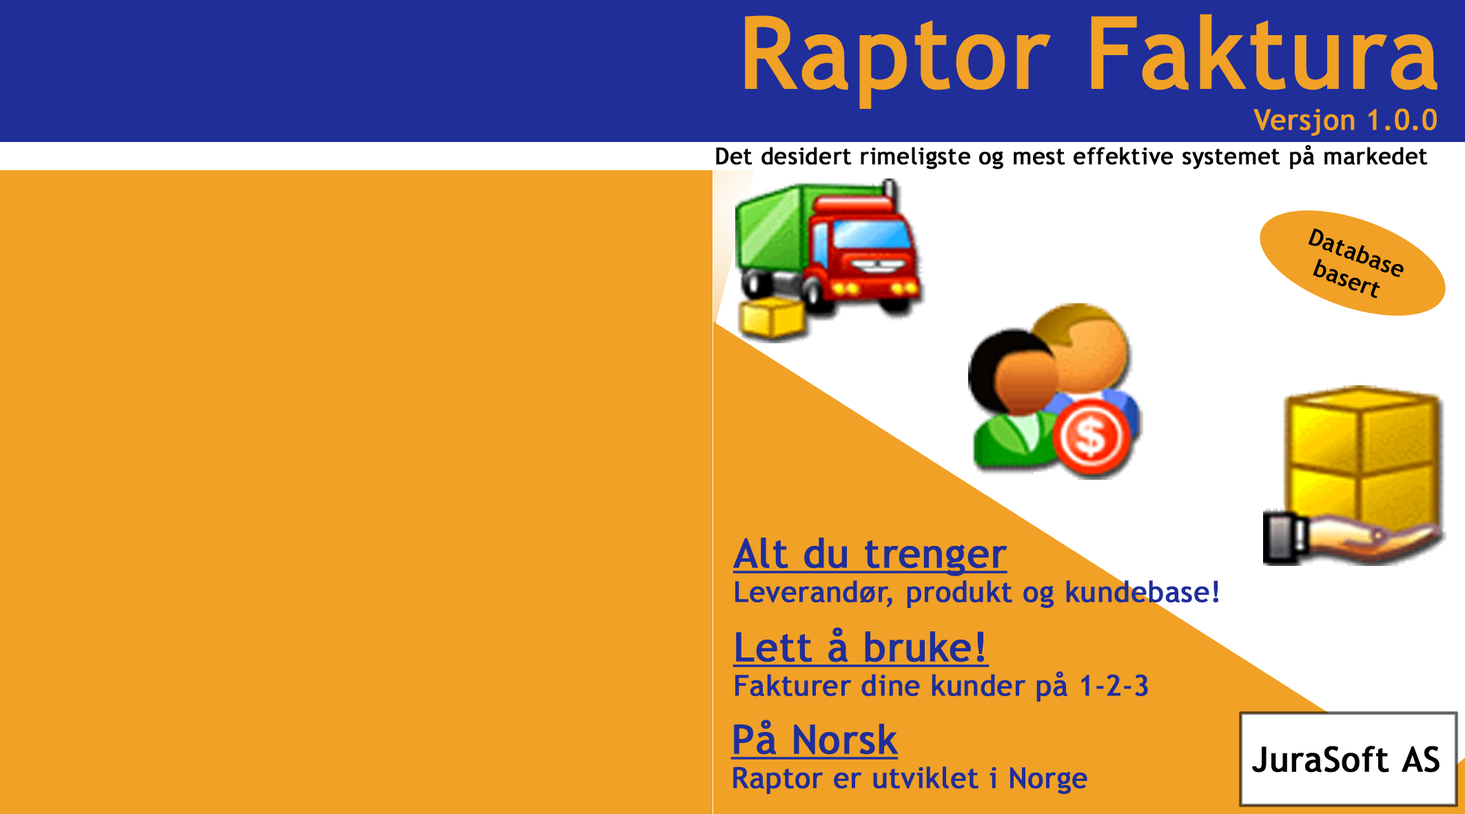
<style>
.page{position:relative;width:1465px;height:814px;background:#f0a126}
.page>*{position:absolute;margin:0}
.t1{font:97.6px "TrebuchetMS";letter-spacing:0.01em;color:#f0a126;font-weight:bold}
.t2{font:28.7px "TrebuchetMS";letter-spacing:0.01em;color:#f0a126;font-weight:bold}
.t3{font:23px "TrebuchetMS";letter-spacing:0.01em;color:#000000;font-weight:bold}
.t4{font:28.7px "TrebuchetMS";letter-spacing:0.01em;color:#202e9a;font-weight:bold}
.t5{font:40.2px "TrebuchetMS";letter-spacing:0.01em;color:#202e9a;font-weight:bold;text-decoration:underline}
.t6{font:34.5px "TrebuchetMS";letter-spacing:0.01em;color:#000000;font-weight:bold}
</style>
<div class="page">
<p class="t1" style="left:745px;top:14px;width:693px;height:95px">Raptor Faktura</p>
<p class="t2" style="left:1254px;top:108px;width:183px;height:28px">Versjon 1.0.0</p>
<p class="t3" style="left:716px;top:145px;width:712px;height:25px">Det desidert rimeligste og mest effektive systemet på markedet</p>
<p class="t3" style="left:1308px;top:228px;width:96px;height:70px;text-align:center;rotate:20deg">Database<br>basert</p>
<p class="t4" style="left:733px;top:538px;width:485px;height:70px"><span class="t5">Alt du trenger<br></span>Leverandør, produkt og kundebase!</p>
<p class="t4" style="left:733px;top:627px;width:415px;height:75px"><span class="t5">Lett å bruke!<br></span>Fakturer dine kunder på 1-2-3</p>
<p class="t4" style="left:730px;top:719px;width:357px;height:75px"><span class="t5">På Norsk<br></span>Raptor er utviklet i Norge</p>
<p class="t6" style="left:1252px;top:746px;width:188px;height:27px">JuraSoft AS</p>
</div>
